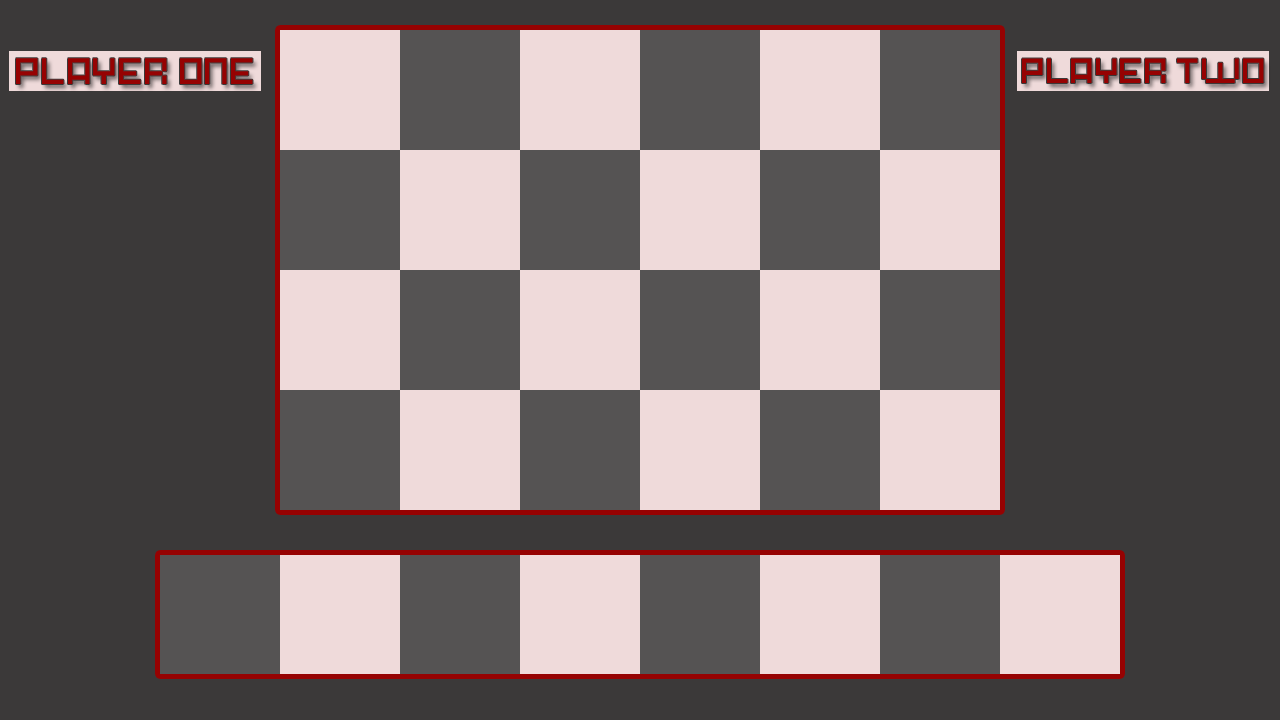
<style>
.page{position:relative;width:1280px;height:720px;background:#3b3939}
.page>*{position:absolute;margin:0}
.t1{font:34.3px "Pixel-Art";color:#960202}
.t2{font:32.5px "Pixel-Art";color:#960202}
</style>
<div class="page">
<p class="t1" style="left:16px;top:58px;width:237px;height:26px">PLAYER ONE</p>
<p class="t2" style="left:1022px;top:58px;width:242px;height:25px">PLAYER TWO</p>
</div>
